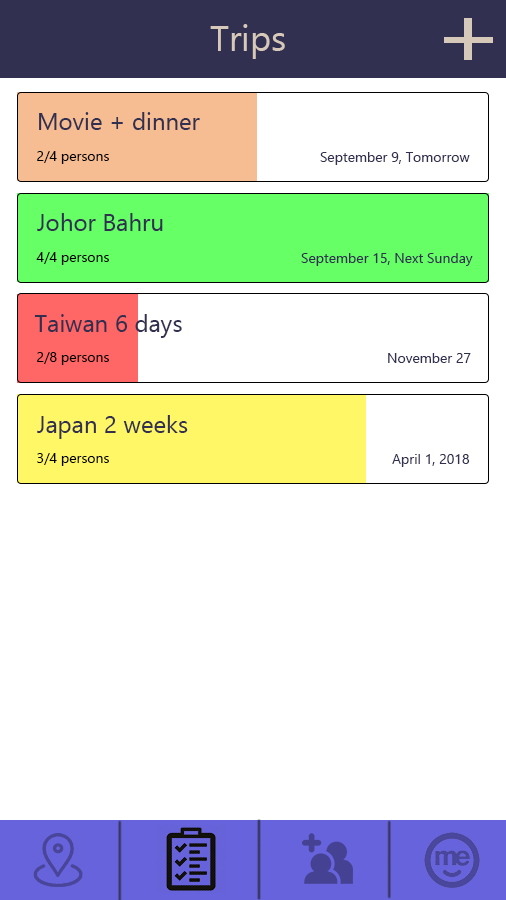
<style>
.page{position:relative;width:506px;height:900px;background:#ffffff}
.page>*{position:absolute;margin:0}
.t1{font:36px "Ebrima";color:#d7c9b9}
.t2{font:24px "Ebrima";color:#313051}
.t3{font:14px "Ebrima";color:#000000}
.t4{font:14px "Ebrima";color:#313051}
</style>
<div class="page">
<p class="t1" style="left:210px;top:24px;width:75px;height:35px">Trips</p>
<p class="t2" style="left:39px;top:112px;width:161px;height:18px">Movie + dinner</p>
<p class="t3" style="left:37px;top:151px;width:72px;height:13px">2/4 persons</p>
<p class="t4" style="left:320px;top:152px;width:150px;height:13px">September 9, Tomorrow</p>
<p class="t2" style="left:37px;top:213px;width:126px;height:18px">Johor Bahru</p>
<p class="t3" style="left:36px;top:252px;width:73px;height:13px">4/4 persons</p>
<p class="t4" style="left:301px;top:253px;width:172px;height:13px">September 15, Next Sunday</p>
<p class="t2" style="left:34px;top:314px;width:148px;height:24px">Taiwan 6 days</p>
<p class="t3" style="left:37px;top:352px;width:72px;height:13px">2/8 persons</p>
<p class="t4" style="left:388px;top:353px;width:83px;height:10px">November 27</p>
<p class="t2" style="left:37px;top:415px;width:151px;height:24px">Japan 2 weeks</p>
<p class="t3" style="left:37px;top:453px;width:72px;height:13px">3/4 persons</p>
<p class="t4" style="left:392px;top:454px;width:78px;height:13px">April 1, 2018</p>
</div>
